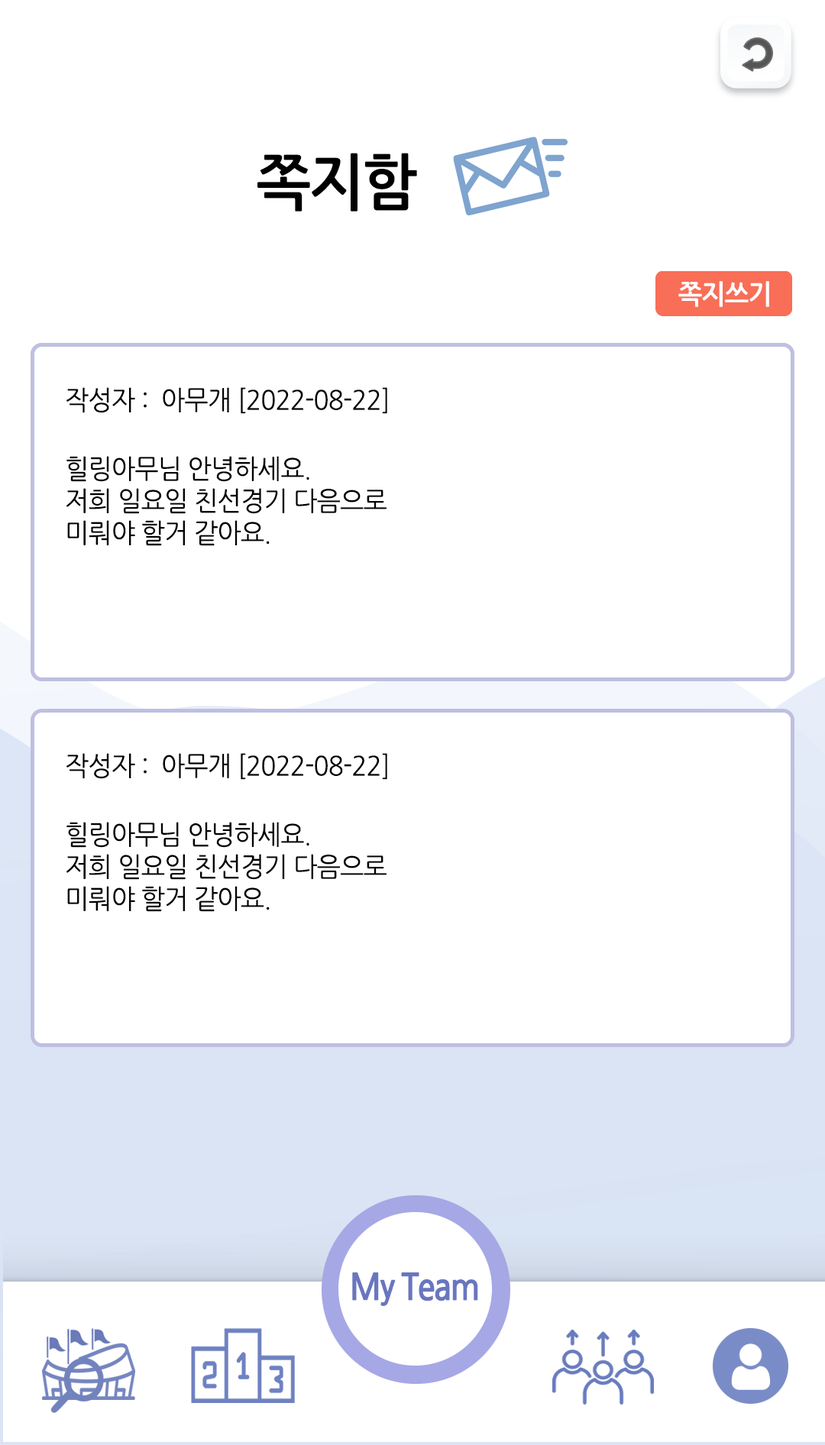
<style>
.page{position:relative;width:825px;height:1445px;background:#ffffff}
.page>*{position:absolute;margin:0}
.t1{font:61.1px "NanumGothicBold";letter-spacing:-0.025em;color:#000000;scale:0.95 1}
.t2{font:26.7px "NanumGothicBold";letter-spacing:-0.025em;color:#ffffff;scale:0.95 1}
.t3{font:26.7px "NanumGothic";letter-spacing:-0.025em;color:#000000;scale:0.95 1}
</style>
<div class="page">
<p class="t1" style="left:257px;top:153px;width:160px;height:59px">쪽지함</p>
<p class="t2" style="left:678px;top:281px;width:91px;height:26px">쪽지쓰기</p>
<p class="t3" style="left:66px;top:387px;width:321px;height:27px">작성자 :  아무개 [2022-08-22]</p>
<p class="t3" style="left:66px;top:387px;width:321px;height:27px">작성자 :  아무개 [2022-08-22]</p>
<p class="t3" style="left:66px;top:456px;width:321px;height:90px">힐링아무님 안녕하세요.<br>저희 일요일 친선경기 다음으로<br>미뤄야 할거 같아요.</p>
<p class="t3" style="left:66px;top:456px;width:321px;height:90px">힐링아무님 안녕하세요.<br>저희 일요일 친선경기 다음으로<br>미뤄야 할거 같아요.</p>
<p class="t3" style="left:66px;top:753px;width:321px;height:27px">작성자 :  아무개 [2022-08-22]</p>
<p class="t3" style="left:66px;top:822px;width:321px;height:90px">힐링아무님 안녕하세요.<br>저희 일요일 친선경기 다음으로<br>미뤄야 할거 같아요.</p>
</div>
